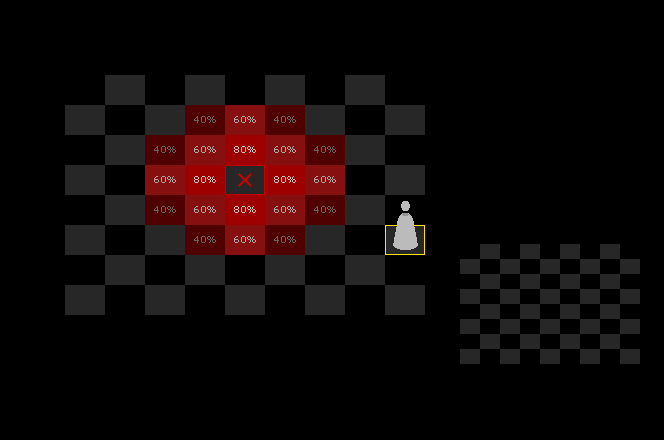
<style>
.page{position:relative;width:664px;height:440px;background:#000000}
.page>*{position:absolute;margin:0}
.t1{font:10px "Verdana";color:#666666}
.t2{font:10px "Verdana";color:#a9a9a9}
.t3{font:10px "Verdana";color:#cccccc}
</style>
<div class="page">
<p class="t1" style="left:194px;top:116px;width:22px;height:7px">40%</p>
<p class="t2" style="left:234px;top:116px;width:22px;height:7px">60%</p>
<p class="t1" style="left:274px;top:116px;width:22px;height:7px">40%</p>
<p class="t1" style="left:154px;top:146px;width:22px;height:7px">40%</p>
<p class="t2" style="left:194px;top:146px;width:22px;height:7px">60%</p>
<p class="t3" style="left:234px;top:146px;width:22px;height:7px">80%</p>
<p class="t2" style="left:274px;top:146px;width:22px;height:7px">60%</p>
<p class="t1" style="left:314px;top:146px;width:22px;height:7px">40%</p>
<p class="t2" style="left:154px;top:176px;width:22px;height:7px">60%</p>
<p class="t3" style="left:194px;top:176px;width:22px;height:7px">80%</p>
<p class="t3" style="left:274px;top:176px;width:22px;height:7px">80%</p>
<p class="t2" style="left:314px;top:176px;width:22px;height:7px">60%</p>
<p class="t1" style="left:154px;top:206px;width:22px;height:7px">40%</p>
<p class="t2" style="left:194px;top:206px;width:22px;height:7px">60%</p>
<p class="t3" style="left:234px;top:206px;width:22px;height:7px">80%</p>
<p class="t2" style="left:274px;top:206px;width:22px;height:7px">60%</p>
<p class="t1" style="left:314px;top:206px;width:22px;height:7px">40%</p>
<p class="t1" style="left:194px;top:236px;width:22px;height:7px">40%</p>
<p class="t2" style="left:234px;top:236px;width:22px;height:7px">60%</p>
<p class="t1" style="left:274px;top:236px;width:22px;height:7px">40%</p>
</div>
